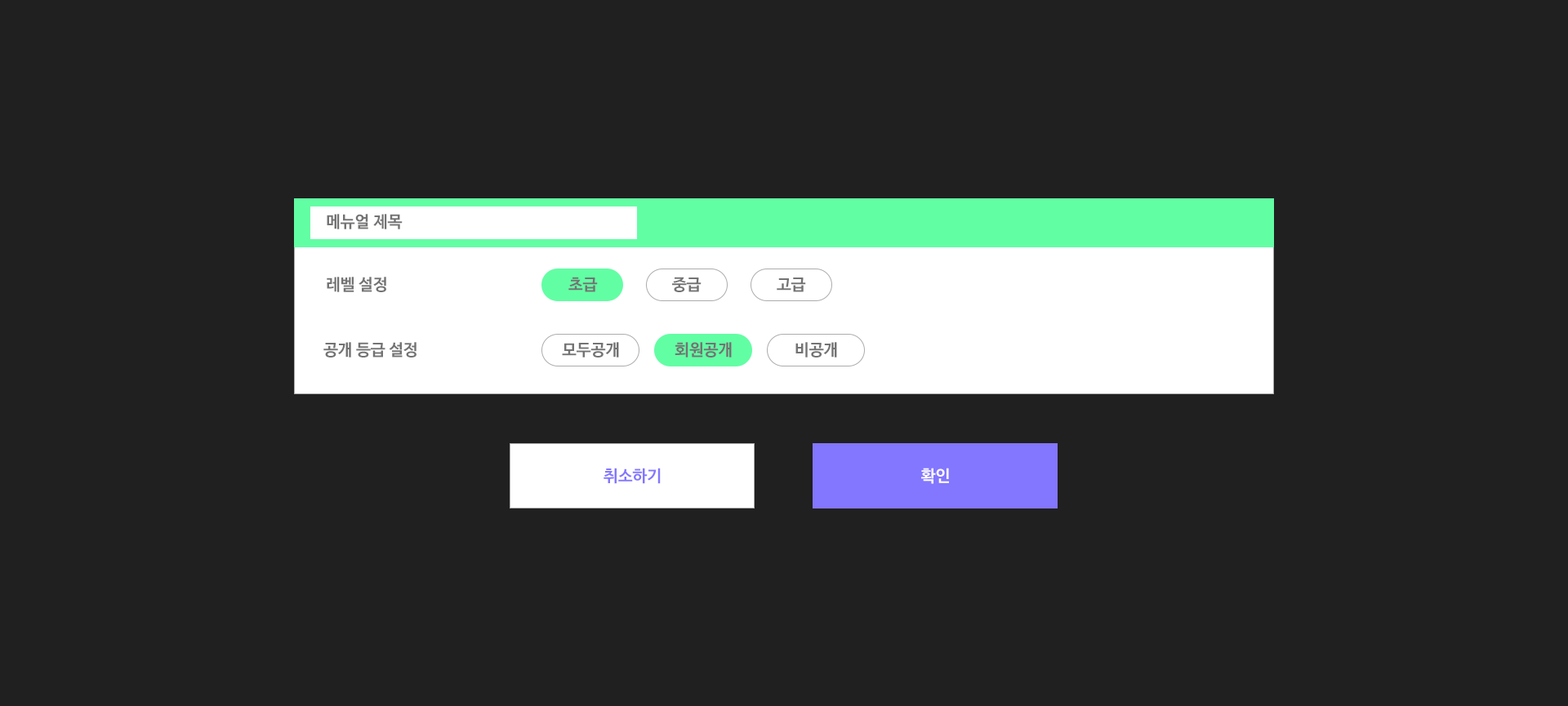
<style>
.page{position:relative;width:1568px;height:706px;background:#202020}
.page>*{position:absolute;margin:0}
.t1{font:16.3px "NanumBarunGothicBold";color:#737373}
.t2{font:16.3px "NanumBarunGothicBold";color:#8376ff}
.t3{font:16.3px "NanumBarunGothicBold";color:#ffffff}
</style>
<div class="page">
<p class="t1" style="left:327px;top:214px;width:76px;height:15px">메뉴얼 제목</p>
<p class="t1" style="left:327px;top:277px;width:59px;height:15px">레벨 설정</p>
<p class="t1" style="left:568px;top:277px;width:30px;height:15px">초급</p>
<p class="t1" style="left:672px;top:277px;width:30px;height:15px">중급</p>
<p class="t1" style="left:777px;top:278px;width:29px;height:14px">고급</p>
<p class="t1" style="left:323px;top:342px;width:93px;height:16px">공개 등급 설정</p>
<p class="t1" style="left:562px;top:342px;width:57px;height:16px">모두공개</p>
<p class="t1" style="left:675px;top:342px;width:57px;height:16px">회원공개</p>
<p class="t1" style="left:795px;top:342px;width:42px;height:16px">비공개</p>
<p class="t2" style="left:604px;top:468px;width:57px;height:16px">취소하기</p>
<p class="t3" style="left:921px;top:468px;width:28px;height:16px">확인</p>
</div>
